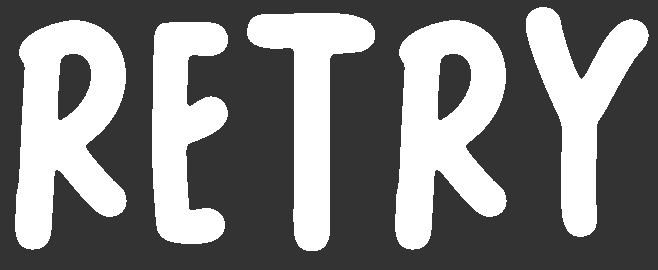
<style>
.page{position:relative;width:658px;height:270px;background:#333333}
.page>*{position:absolute;margin:0}
.t1{font:299.7px "BaksoSapi";letter-spacing:-0.04em;color:#ffffff;scale:0.74 1}
</style>
<div class="page">
<p class="t1" style="left:15px;top:7px;width:634px;height:244px">RETRY</p>
</div>
